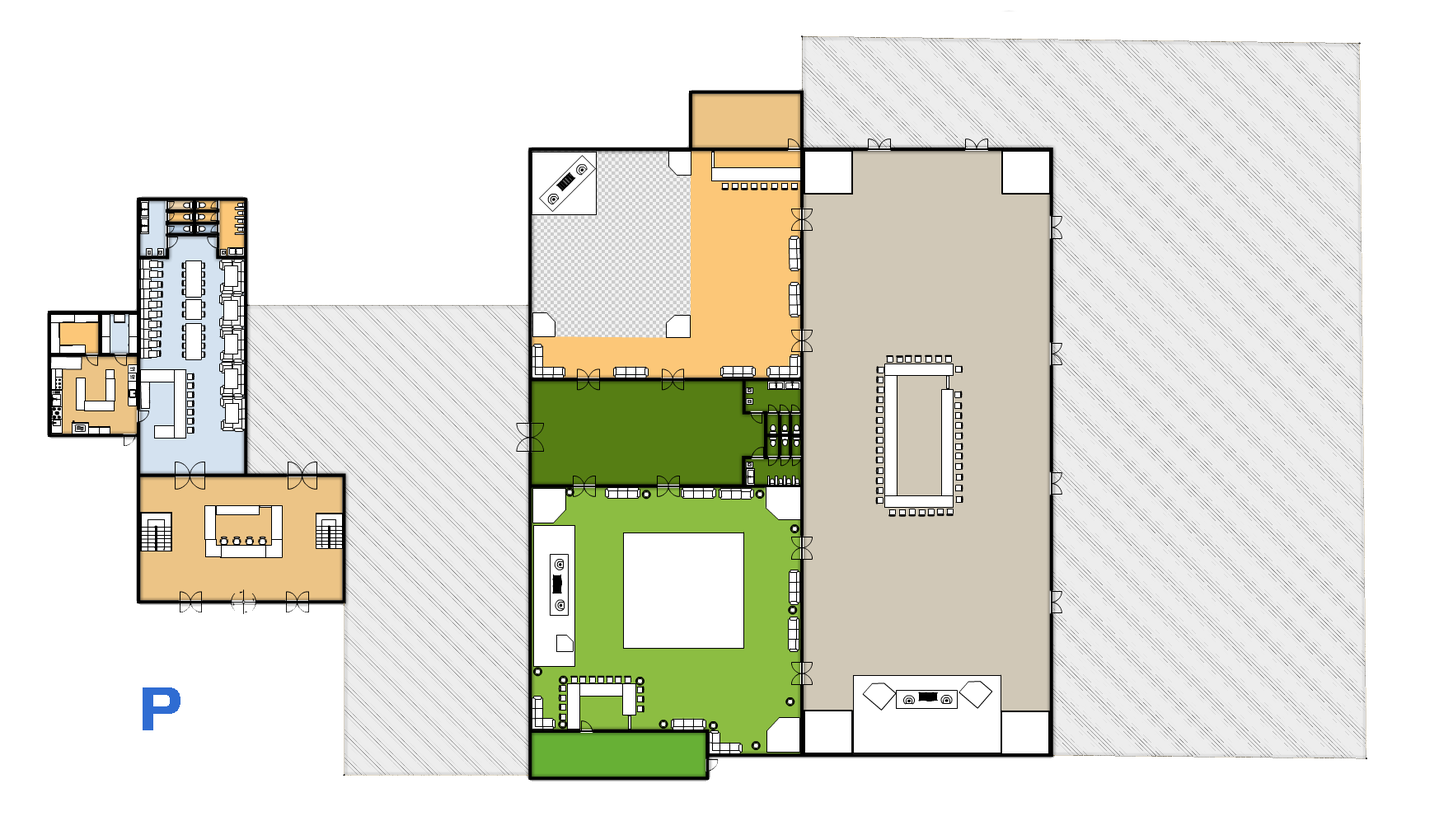
<style>
.page{position:relative;width:1453px;height:821px;background:#ffffff}
.page>*{position:absolute;margin:0}
.t1{font:59.3px "Moire-Bold";color:#2f6cd2}
</style>
<div class="page">
<p class="t1" style="left:143px;top:687px;width:37px;height:43px">P</p>
</div>
